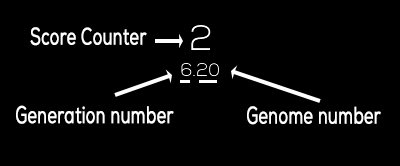
<style>
.page{position:relative;width:400px;height:166px;background:#000000}
.page>*{position:absolute;margin:0}
.t1{font:24px "NexaRegular";color:#ffffff;font-weight:bold;scale:0.67 1}
</style>
<div class="page">
<p class="t1" style="left:30px;top:27px;width:117px;height:19px">Score Counter</p>
<p class="t1" style="left:16px;top:105px;width:158px;height:19px">Generation number</p>
<p class="t1" style="left:247px;top:106px;width:134px;height:19px">Genome number</p>
</div>
